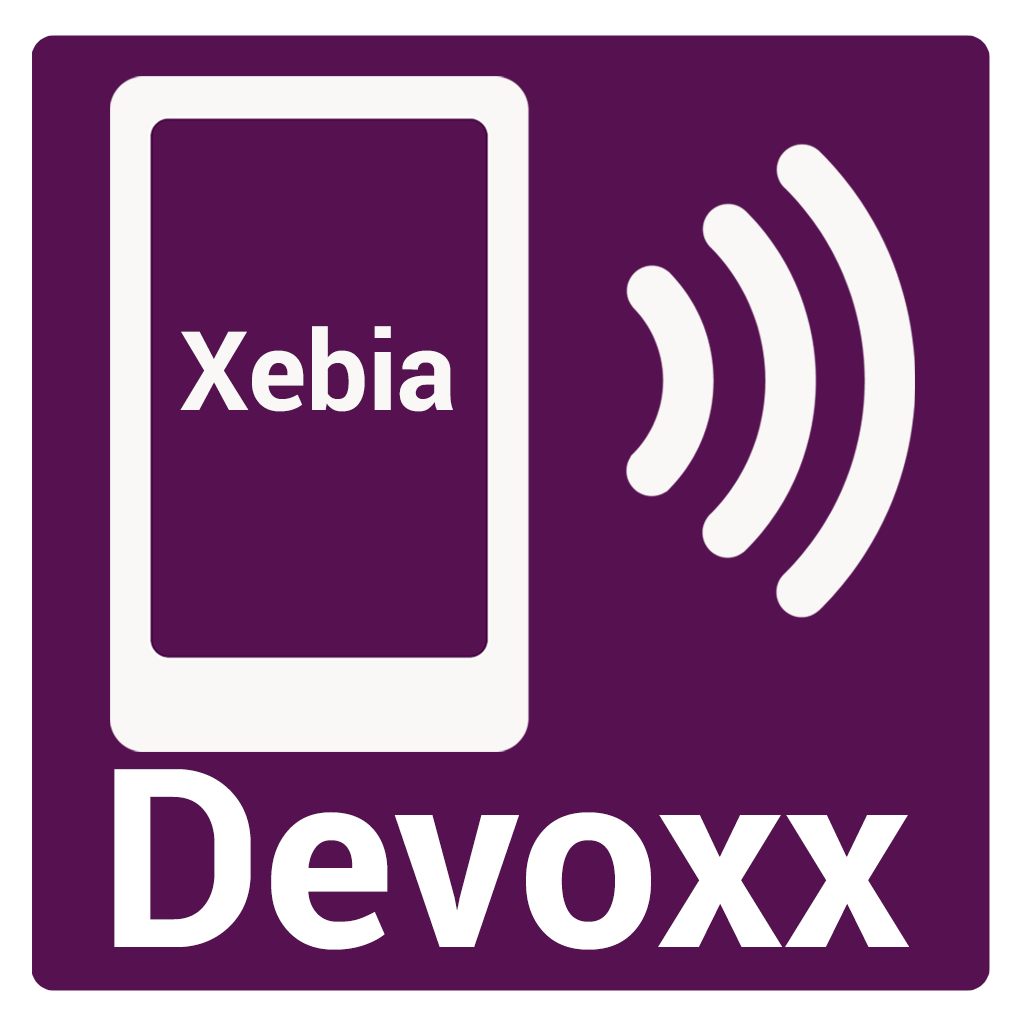
<style>
.page{position:relative;width:1024px;height:1024px;background:#551150}
.page>*{position:absolute;margin:0}
.t1{font:110px "Roboto-Bold";color:#faf8f7}
.t2{font:250px "Roboto-Bold";color:#ffffff}
</style>
<div class="page">
<p class="t1" style="left:180px;top:326px;width:273px;height:86px">Xebia</p>
<p class="t2" style="left:114px;top:769px;width:795px;height:181px">Devoxx</p>
</div>
